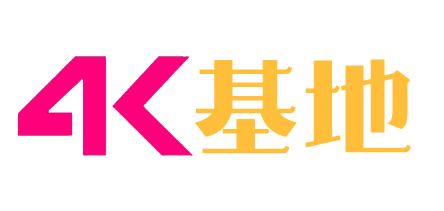
<style>
.page{position:relative;width:444px;height:211px;background:#ffffff}
.page>*{position:absolute;margin:0}
.t1{font:112px "MFHuaZhangNoncommercial-Regular";color:#ffbf3a}
</style>
<div class="page">
<p class="t1" style="left:195px;top:59px;width:216px;height:95px">基地</p>
</div>
